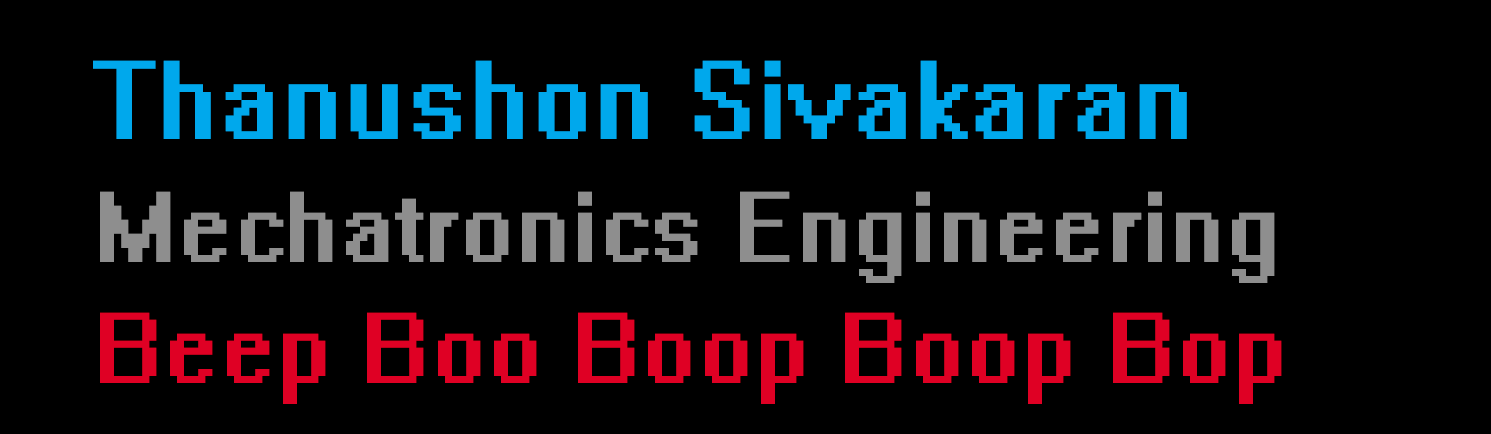
<style>
.page{position:relative;width:1491px;height:434px;background:#000000}
.page>*{position:absolute;margin:0}
.t1{font:100px "System";color:#00a8ec}
.t2{font:90px "System";color:#8e8e8e}
.t3{font:90px "System";color:#df0024}
</style>
<div class="page">
<p class="t1" style="left:93px;top:60px;width:1094px;height:79px">Thanushon Sivakaran</p>
<p class="t2" style="left:100px;top:191px;width:1175px;height:92px">Mechatronics Engineering</p>
<p class="t3" style="left:100px;top:312px;width:1182px;height:92px">Beep Boo Boop Boop Bop</p>
</div>
